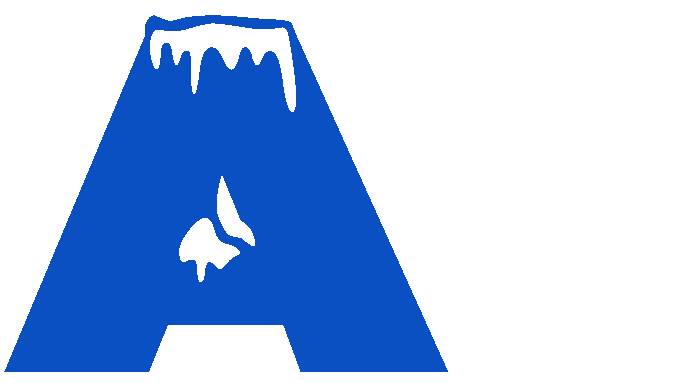
<style>
.page{position:relative;width:677px;height:383px;background:#ffffff}
.page>*{position:absolute;margin:0}
.t1{font:572.8px "Chilled";color:#0b50c3;scale:0.82 1}
</style>
<div class="page">
<p class="t1" style="left:4px;top:15px;width:444px;height:357px">A</p>
</div>
